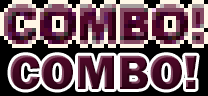
<style>
.page{position:relative;width:208px;height:96px;background:#000000}
.page>*{position:absolute;margin:0}
.t1{font:50px "FranklinGothic-Heavy"}
</style>
<div class="page">
<p class="t1" style="left:10px;top:55px;width:187px;height:35px">COMBO!</p>
</div>
